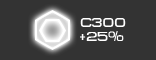
<style>
.page{position:relative;width:156px;height:60px;background:#333333}
.page>*{position:absolute;margin:0}
.t1{font:13px "MetroDF";color:#ffffff}
</style>
<div class="page">
<p class="t1" style="left:80px;top:18px;width:46px;height:9px">c300</p>
<p class="t1" style="left:80px;top:31px;width:44px;height:10px">+25%</p>
</div>
